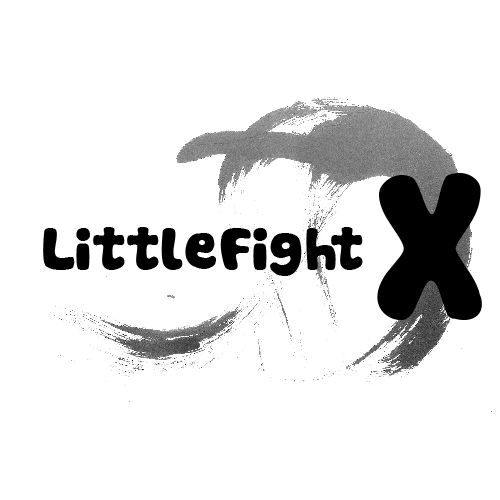
<style>
.page{position:relative;width:500px;height:500px;background:#ffffff}
.page>*{position:absolute;margin:0}
.t1{font:200px "Cookies";color:#000000}
.t2{font:58.4px "Cookies";color:#000000}
</style>
<div class="page">
<p class="t1" style="left:377px;top:173px;width:105px;height:147px">X</p>
<p class="t2" style="left:43px;top:227px;width:320px;height:49px">LittleFight</p>
</div>
